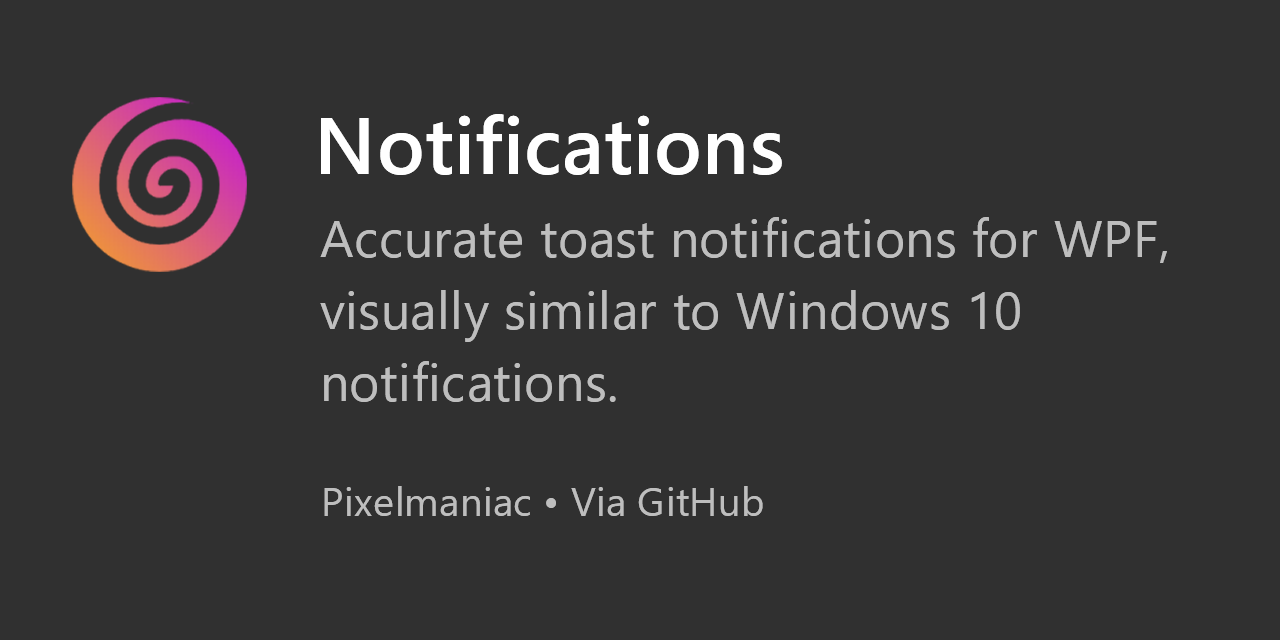
<style>
.page{position:relative;width:1280px;height:640px;background:#303030}
.page>*{position:absolute;margin:0}
.t1{font:80px "SegoeUI-Semibold";letter-spacing:0.01em;color:#ffffff}
.t2{font:52px/72px "SegoeUI";letter-spacing:0.01em;color:#bebebe}
.t3{font:40px "SegoeUI";letter-spacing:0.01em;color:#bebebe}
</style>
<div class="page">
<p class="t1" style="left:321px;top:114px;width:461px;height:61px">Notifications</p>
<p class="t2" style="left:320px;top:217px;width:847px;height:185px">Accurate toast notifications for WPF,<br>visually similar to Windows 10<br>notifications.</p>
<p class="t3" style="left:324px;top:486px;width:439px;height:30px">Pixelmaniac • Via GitHub</p>
</div>
